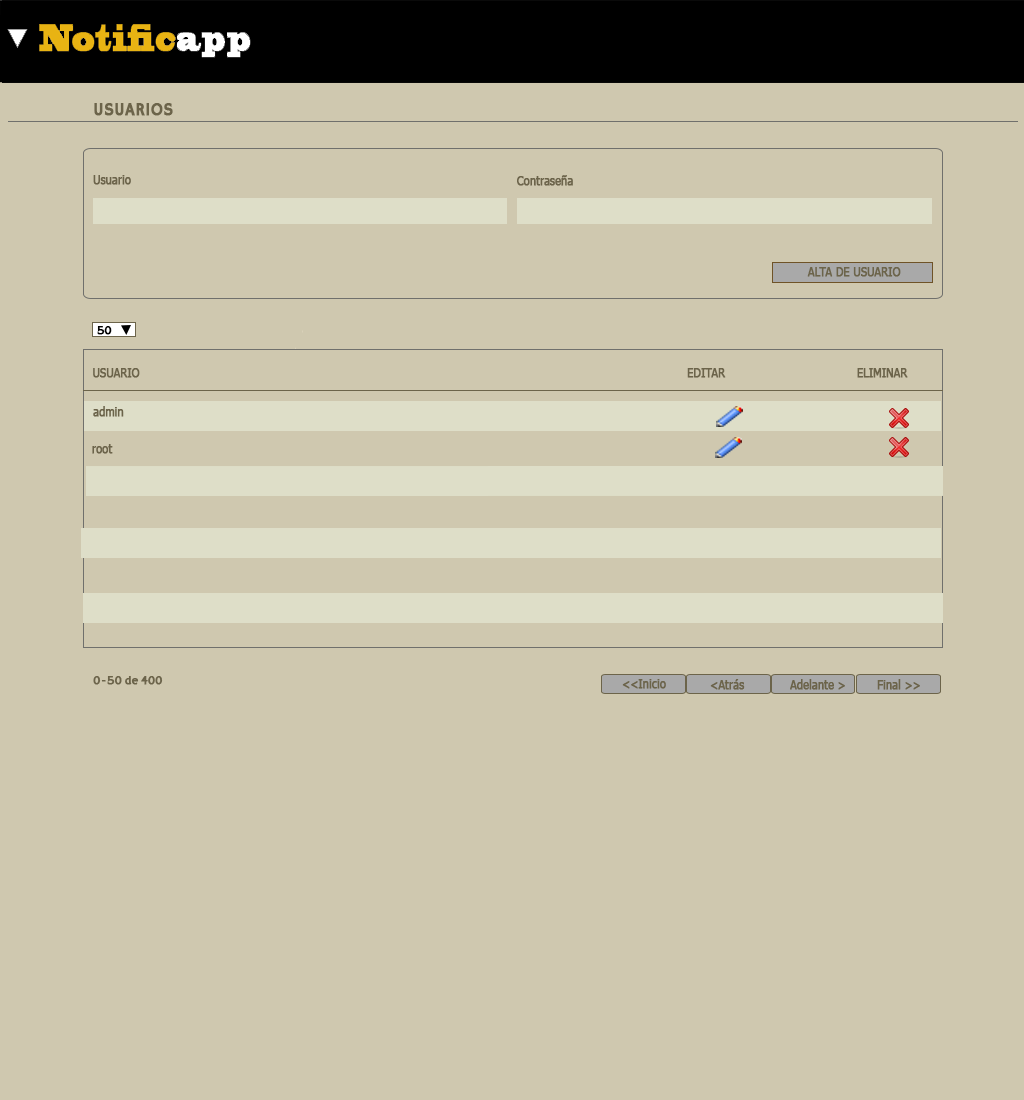
<style>
.page{position:relative;width:1024px;height:1100px;background:#cfc8af}
.page>*{position:absolute;margin:0}
.t1{font:18px "HammersmithOne";color:#6c644a;font-weight:bold;scale:0.9 1}
.t2{font:12px "Tahoma";color:#6c644a;font-weight:bold;scale:0.9 1}
.t3{font:12px "HammersmithOne";color:#000000;font-weight:bold;scale:0.9 1}
.t4{font:12px "HammersmithOne";color:#6c644a;font-weight:bold;scale:0.9 1}
</style>
<div class="page">
<p class="t1" style="left:94px;top:103px;width:79px;height:13px">USUARIOS</p>
<p class="t2" style="left:93px;top:175px;width:38px;height:10px">Usuario</p>
<p class="t2" style="left:517px;top:175px;width:56px;height:11px">Contraseña</p>
<p class="t2" style="left:807px;top:267px;width:94px;height:10px">ALTA DE USUARIO</p>
<p class="t3" style="left:97px;top:326px;width:15px;height:9px">50</p>
<p class="t2" style="left:93px;top:368px;width:47px;height:10px">USUARIO</p>
<p class="t2" style="left:687px;top:368px;width:39px;height:10px">EDITAR</p>
<p class="t2" style="left:857px;top:368px;width:51px;height:10px">ELIMINAR</p>
<p class="t2" style="left:93px;top:406px;width:31px;height:11px">admin</p>
<p class="t2" style="left:92px;top:444px;width:21px;height:10px">root</p>
<p class="t4" style="left:93px;top:676px;width:70px;height:9px">0-50 de 400</p>
<p class="t2" style="left:622px;top:679px;width:44px;height:10px">&lt;&lt;Inicio</p>
<p class="t2" style="left:710px;top:679px;width:35px;height:11px">&lt;Atrás</p>
<p class="t2" style="left:790px;top:679px;width:55px;height:11px">Adelante &gt;</p>
<p class="t2" style="left:877px;top:679px;width:43px;height:11px">Final &gt;&gt;</p>
</div>
